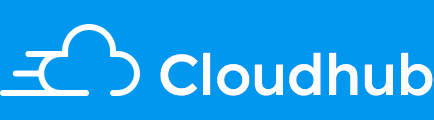
<style>
.page{position:relative;width:434px;height:120px;background:#0098ef}
.page>*{position:absolute;margin:0}
.t1{font:56px "Montserrat-Regular";color:#ffffff}
</style>
<div class="page">
<p class="t1" style="left:160px;top:52px;width:273px;height:44px">Cloudhub</p>
</div>
